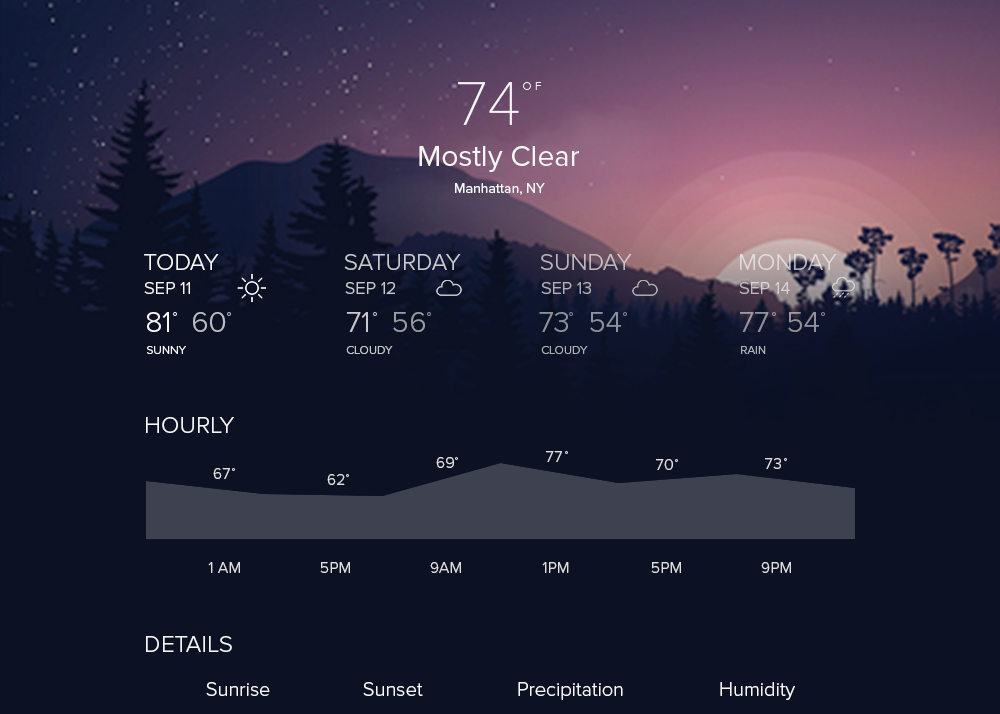
<style>
.page{position:relative;width:1000px;height:714px;background:#0c1124}
.page>*{position:absolute;margin:0}
.t1{font:64px "ProximaNovaT-Thin";color:#f7f7f7}
.t2{font:12px "ProximaNovaT-Thin";color:#f7f7f7}
.t3{font:30px "ProximaNova-Regular";color:#f7f7f7}
.t4{font:14px "ProximaNova-Regular";color:#f7f7f7}
.t5{font:24px "ProximaNova-Light";color:#f7f7f7}
.t6{font:24px "ProximaNova-Light";color:#c9cacf}
.t7{font:24px "ProximaNova-Light";color:#b9b6bc}
.t8{font:24px "ProximaNova-Light";color:#e0dada}
.t9{font:18px "ProximaNova-Light";color:#f7f7f7}
.t10{font:18px "ProximaNova-Light";color:#c8c9cd}
.t11{font:18px "ProximaNova-Light";color:#b3b3b9}
.t12{font:18px "ProximaNova-Light";color:#d7d3d4}
.t13{font:30px "ProximaNova-Light";color:#f7f7f7}
.t14{font:30px "ProximaNova-Light";color:#bcbdc2}
.t15{font:30px "ProximaNova-Light";color:#c8c9cd}
.t16{font:30px "ProximaNova-Light";color:#999ba2}
.t17{font:30px "ProximaNova-Light";color:#8e919a}
.t18{font:30px "ProximaNova-Light";color:#8f919b}
.t19{font:30px "ProximaNova-Light";color:#94949e}
.t20{font:12px "ProximaNova-Light";color:#f7f7f7}
.t21{font:12px "ProximaNova-Light";color:#c8c9cd}
.t22{font:12px "ProximaNova-Light";color:#aeb0b4}
.t23{font:12px "ProximaNova-Light";color:#afb0b6}
.t24{font:16px "ProximaNova-Light";color:#f7f7f7}
.t25{font:20px "ProximaNova-Light";color:#f7f7f7}
</style>
<div class="page">
<p class="t1" style="left:458px;top:82px;width:61px;height:43px">74</p>
<p class="t2" style="left:535px;top:82px;width:6px;height:8px">F</p>
<p class="t3" style="left:419px;top:146px;width:160px;height:26px">Mostly Clear</p>
<p class="t4" style="left:455px;top:183px;width:90px;height:12px">Manhattan, NY</p>
<p class="t5" style="left:144px;top:254px;width:75px;height:16px">TODAY</p>
<p class="t6" style="left:344px;top:254px;width:117px;height:16px">SATURDAY</p>
<p class="t7" style="left:540px;top:254px;width:92px;height:16px">SUNDAY</p>
<p class="t8" style="left:740px;top:254px;width:97px;height:16px">MONDAY</p>
<p class="t9" style="left:144px;top:282px;width:46px;height:12px">SEP 11</p>
<p class="t10" style="left:345px;top:282px;width:50px;height:12px">SEP 12</p>
<p class="t11" style="left:541px;top:282px;width:50px;height:12px">SEP 13</p>
<p class="t12" style="left:739px;top:282px;width:51px;height:12px">SEP 14</p>
<p class="t13" style="left:147px;top:312px;width:22px;height:20px">81</p>
<p class="t14" style="left:193px;top:312px;width:33px;height:20px">60</p>
<p class="t15" style="left:347px;top:312px;width:21px;height:20px">71</p>
<p class="t16" style="left:393px;top:312px;width:32px;height:20px">56</p>
<p class="t17" style="left:539px;top:312px;width:29px;height:20px">73</p>
<p class="t18" style="left:590px;top:312px;width:31px;height:20px">54</p>
<p class="t19" style="left:740px;top:312px;width:29px;height:20px">77</p>
<p class="t18" style="left:788px;top:312px;width:31px;height:20px">54</p>
<p class="t20" style="left:147px;top:346px;width:39px;height:8px">SUNNY</p>
<p class="t21" style="left:346px;top:346px;width:47px;height:8px">CLOUDY</p>
<p class="t22" style="left:541px;top:346px;width:47px;height:8px">CLOUDY</p>
<p class="t23" style="left:741px;top:346px;width:25px;height:8px">RAIN</p>
<p class="t5" style="left:146px;top:417px;width:88px;height:16px">HOURLY</p>
<p class="t24" style="left:436px;top:457px;width:18px;height:11px">69</p>
<p class="t24" style="left:546px;top:451px;width:16px;height:11px">77</p>
<p class="t24" style="left:656px;top:459px;width:17px;height:11px">70</p>
<p class="t24" style="left:765px;top:458px;width:16px;height:11px">73</p>
<p class="t24" style="left:213px;top:468px;width:17px;height:11px">67</p>
<p class="t24" style="left:327px;top:474px;width:18px;height:11px">62</p>
<p class="t24" style="left:208px;top:562px;width:32px;height:11px">1 AM</p>
<p class="t24" style="left:320px;top:562px;width:30px;height:11px">5PM</p>
<p class="t24" style="left:430px;top:562px;width:31px;height:11px">9AM</p>
<p class="t24" style="left:542px;top:562px;width:27px;height:11px">1PM</p>
<p class="t24" style="left:651px;top:562px;width:30px;height:11px">5PM</p>
<p class="t24" style="left:761px;top:562px;width:30px;height:11px">9PM</p>
<p class="t5" style="left:146px;top:636px;width:86px;height:16px">DETAILS</p>
<p class="t25" style="left:206px;top:682px;width:64px;height:14px">Sunrise</p>
<p class="t25" style="left:363px;top:682px;width:60px;height:14px">Sunset</p>
<p class="t25" style="left:518px;top:682px;width:105px;height:18px">Precipitation</p>
<p class="t25" style="left:720px;top:682px;width:75px;height:18px">Humidity</p>
</div>
